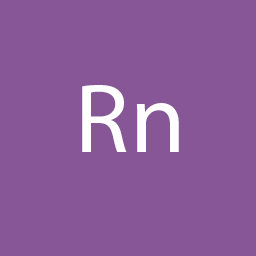
<style>
.page{position:relative;width:256px;height:256px;background:#865696}
.page>*{position:absolute;margin:0}
.t1{font:100px "MyriadPro-Regular";color:#ffffff}
</style>
<div class="page">
<p class="t1" style="left:82px;top:85px;width:97px;height:67px">Rn</p>
</div>
